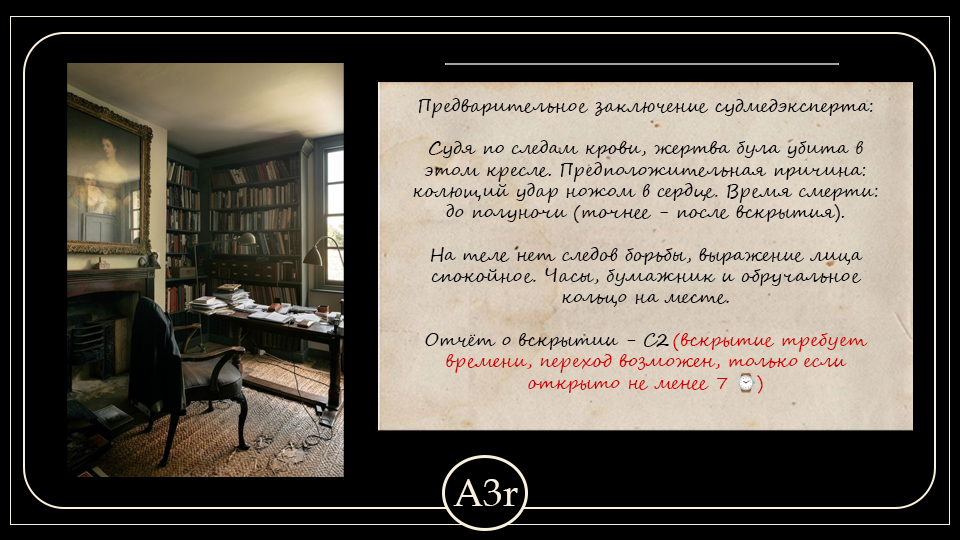
<style>
.page{position:relative;width:960px;height:540px;background:#000000}
.page>*{position:absolute;margin:0}
.t1{font:17.8px "SegoeScript";color:#000000}
.t2{font:17.8px "SegoeScript";color:#cf0000}
.t3{font:17.8px "NotoColorEmoji-SVG";color:#cf0000}
.t4{font:38.8px "BookAntiqua";color:#f9f1de}
</style>
<div class="page">
<p class="t1" style="left:413px;top:98px;width:465px;height:296px;text-align:center">Предварительное заключение судмедэксперта:<br><br>Судя по следам крови, жертва була убита в этом кресле. Предположительная причина: колющий удар ножом в сердце. Время смерти: до полуночи (точнее - после вскрытия).<br><br>На теле нет следов борьбы, выражение лица спокойное. Часы, бумажник и обручальное кольцо на месте.<br><br>Отчёт о вскрытии - C2 <span class="t2">(вскрытие требует времени, переход возможен, только если открыто не менее 7 </span><span class="t3">⌚</span><span class="t2">)</span></p>
<p class="t4" style="left:453px;top:479px;width:65px;height:27px">A3r</p>
</div>
